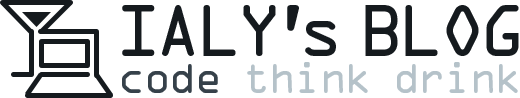
<style>
.page{position:relative;width:520px;height:98px;background:#ffffff}
.page>*{position:absolute;margin:0}
.t1{font:65px "OCRAStd";letter-spacing:-0.1em;color:#151a1e}
.t2{font:65px "OCRAStd";letter-spacing:-0.2em;color:#151a1e}
.t3{font:65px "OCRAStd";letter-spacing:-0.3em;color:#151a1e}
.t4{font:40px "OCRAStd";letter-spacing:-0.08em;color:#36414a}
.t5{font:40px "OCRAStd";letter-spacing:-0.08em;color:#b5c2c9}
</style>
<div class="page">
<p class="t1" style="left:122px;top:5px;width:397px;height:51px">IAL<span class="t2">Y</span><span class="t3">’</span>s BLOG</p>
<p class="t4" style="left:122px;top:64px;width:96px;height:29px">code</p>
<p class="t5" style="left:247px;top:62px;width:121px;height:31px">think</p>
<p class="t5" style="left:397px;top:62px;width:121px;height:31px">drink</p>
</div>
